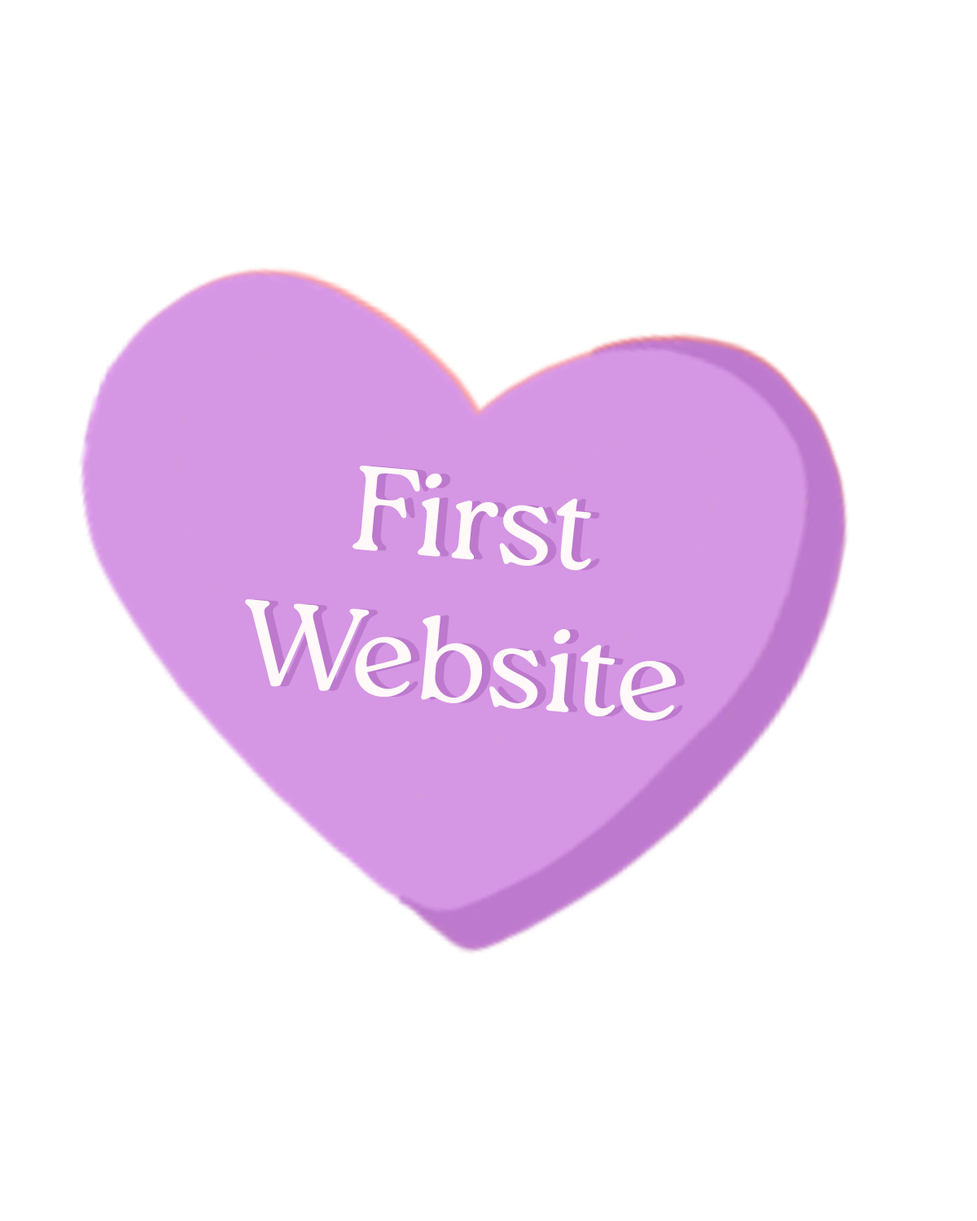
<style>
.page{position:relative;width:977px;height:1221px;background:#ffffff}
.page>*{position:absolute;margin:0}
.t1{font:119.5px "Roca-Light";color:#fff9f9}
</style>
<div class="page">
<p class="t1" style="left:245px;top:466px;width:431px;height:255px;text-align:center;rotate:5deg">First <br>Website</p>
</div>
